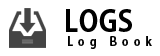
<style>
.page{position:relative;width:160px;height:56px;background:#ffffff}
.page>*{position:absolute;margin:0}
.t1{font:29px "AdobeGothicStd-Bold";color:#000000;scale:0.95 1}
.t2{font:12px "AdobeGothicStd-Bold";letter-spacing:0.45em;color:#000000;scale:0.95 1}
</style>
<div class="page">
<p class="t1" style="left:66px;top:9px;width:66px;height:23px">LOGS</p>
<p class="t2" style="left:68px;top:36px;width:84px;height:13px">Log Book</p>
</div>
